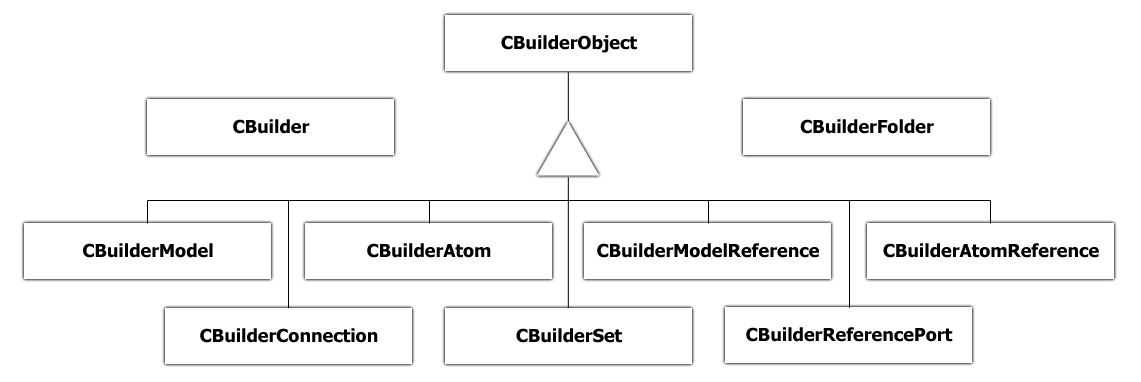
<style>
.page{position:relative;width:1141px;height:382px;background:#ffffff}
.page>*{position:absolute;margin:0}
.t1{font:18px "Tahoma-Bold";color:#000000}
</style>
<div class="page">
<p class="t1" style="left:501px;top:35px;width:136px;height:18px">CBuilderObject</p>
<p class="t1" style="left:233px;top:119px;width:77px;height:15px">CBuilder</p>
<p class="t1" style="left:800px;top:119px;width:134px;height:15px">CBuilderFolder</p>
<p class="t1" style="left:83px;top:243px;width:130px;height:15px">CBuilderModel</p>
<p class="t1" style="left:367px;top:243px;width:124px;height:15px">CBuilderAtom</p>
<p class="t1" style="left:597px;top:243px;width:222px;height:15px">CBuilderModelReference</p>
<p class="t1" style="left:883px;top:243px;width:216px;height:15px">CBuilderAtomReference</p>
<p class="t1" style="left:200px;top:328px;width:178px;height:15px">CBuilderConnection</p>
<p class="t1" style="left:516px;top:328px;width:106px;height:15px">CBuilderSet</p>
<p class="t1" style="left:746px;top:327px;width:207px;height:15px">CBuilderReferencePort</p>
</div>
